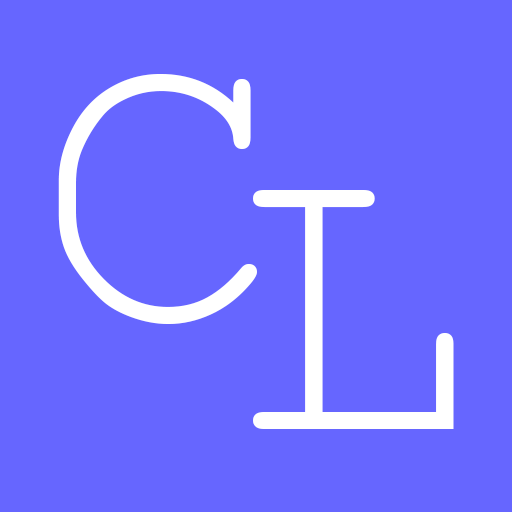
<style>
.page{position:relative;width:512px;height:512px;background:#6666ff}
.page>*{position:absolute;margin:0}
.t1{font:416.7px "CourierNewPSMT";color:#ffffff}
</style>
<div class="page">
<p class="t1" style="left:58px;top:74px;width:199px;height:250px">C</p>
<p class="t1" style="left:253px;top:190px;width:201px;height:239px">L</p>
</div>
